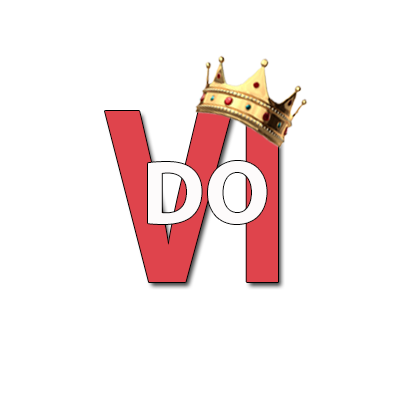
<style>
.page{position:relative;width:400px;height:400px;background:#ffffff}
.page>*{position:absolute;margin:0}
.t1{font:253.9px "MyriadPro-Bold";color:#df444c;scale:0.8 1}
.t2{font:90px "MyriadPro-Bold";color:#fdfbfb}
</style>
<div class="page">
<p class="t1" style="left:105px;top:111px;width:173px;height:171px">VI</p>
<p class="t2" style="left:148px;top:161px;width:119px;height:63px">DO</p>
</div>
